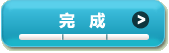
<style>
.page{position:relative;width:169px;height:53px}
.page>*{position:absolute;margin:0}
.t1{font:16px "MicrosoftYaHei-Bold";color:#ffffff}
</style>
<div class="page">
<p class="t1" style="left:59px;top:12px;width:47px;height:17px">完   成</p>
</div>
